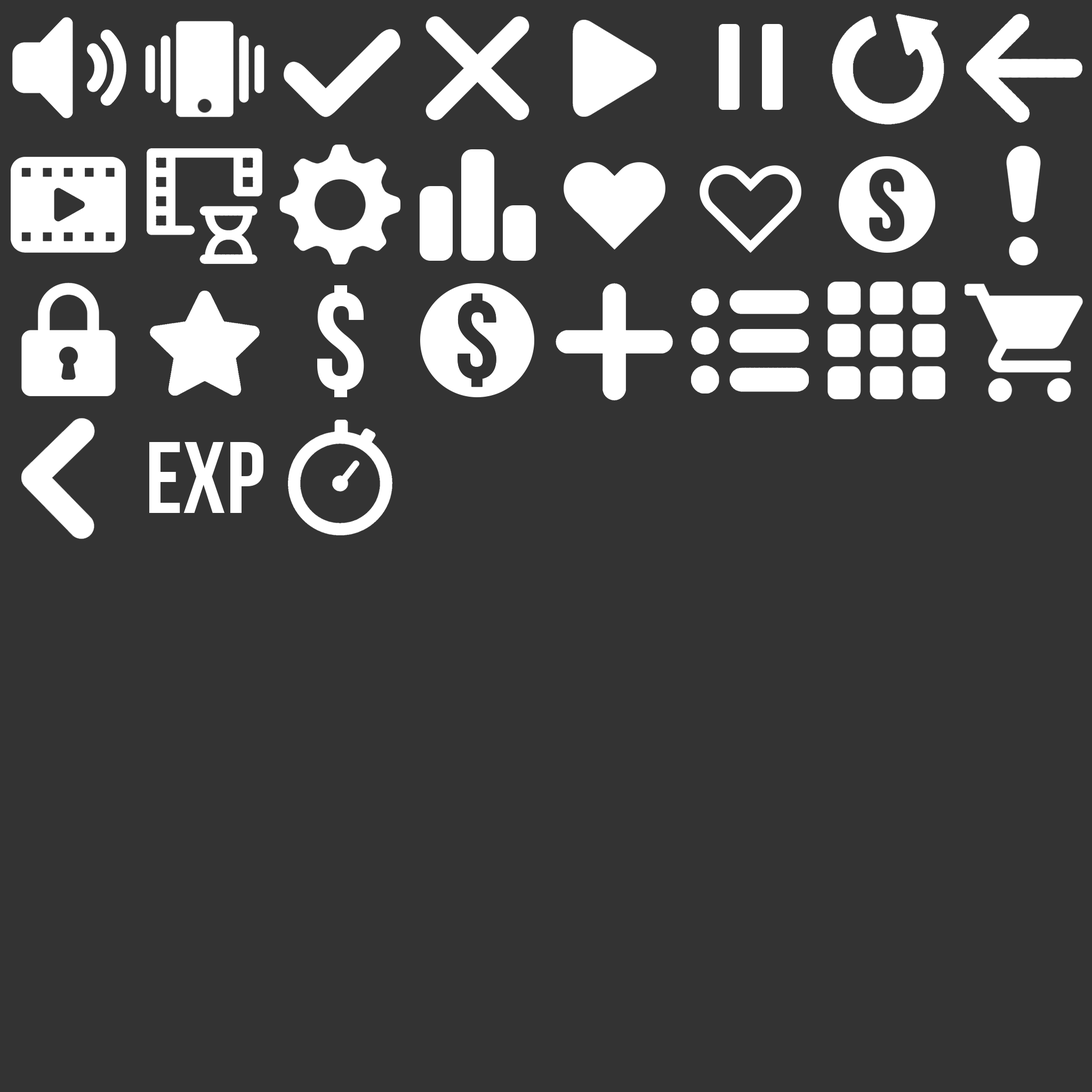
<style>
.page{position:relative;width:1092px;height:1092px;background:#333333}
.page>*{position:absolute;margin:0}
.t1{font:101.5px "BebasNeue";color:#ffffff}
</style>
<div class="page">
<p class="t1" style="left:149px;top:442px;width:114px;height:71px">EXP</p>
</div>
